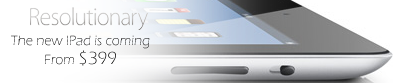
<style>
.page{position:relative;width:393px;height:83px;background:#ffffff}
.page>*{position:absolute;margin:0}
.t1{font:14px "ErasITC-Light"}
.t2{font:18px "ErasITC-Light"}
</style>
<div class="page">
<p class="t1" style="left:11px;top:35px;width:139px;height:14px">The new IPad is coming</p>
<p class="t1" style="left:45px;top:50px;width:71px;height:16px">From <span class="t2">$399</span></p>
</div>
